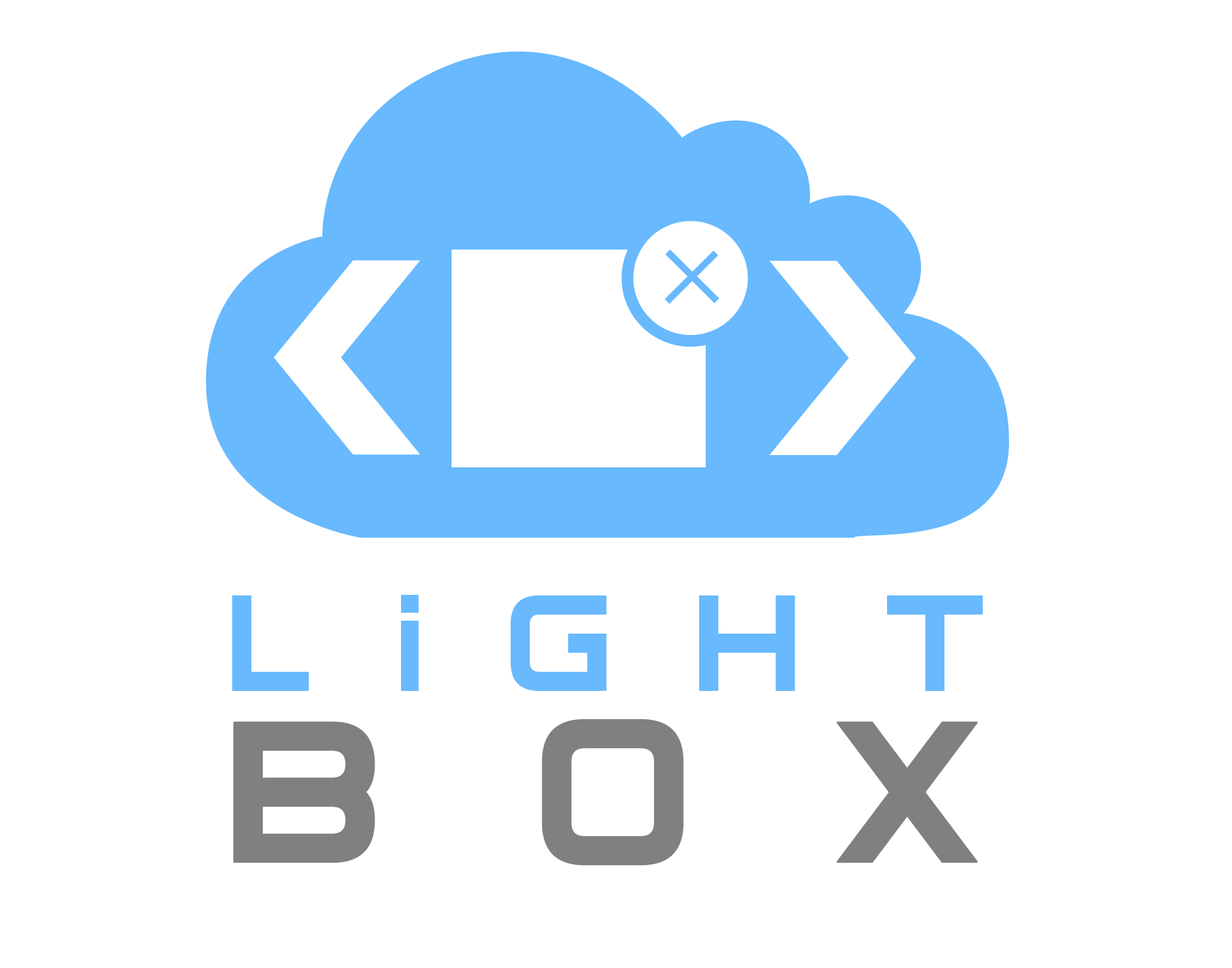
<style>
.page{position:relative;width:1232px;height:968px;background:#ffffff}
.page>*{position:absolute;margin:0}
.t1{font:159.5px/183.5px "Archangelsk";letter-spacing:0.517em;color:#68b9fd}
.t2{font:233.4px/171.2px "Archangelsk";letter-spacing:0.634em;color:#808080;font-weight:bold}
</style>
<div class="page">
<p class="t1" style="left:232px;top:595px;width:751px;height:271px;text-align:center">LiGHT<br><span class="t2">BOX</span></p>
</div>
